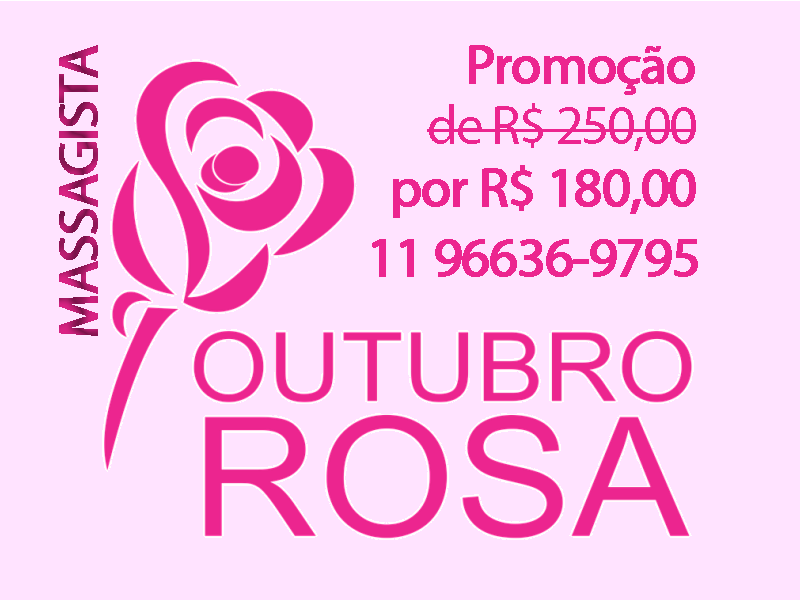
<style>
.page{position:relative;width:800px;height:600px;background:#ffe3ff}
.page>*{position:absolute;margin:0}
.t1{font:55.2px "MyriadPro-Regular";letter-spacing:-0.04em;font-weight:bold}
.t2{font:55.5px/61.4px "MyriadPro-Regular";letter-spacing:-0.04em;color:#ec258f;font-weight:bold}
.t3{font:55.5px/61.4px "MyriadPro-Regular";letter-spacing:-0.04em;color:#ec258f}
.t4{font:55.5px "MyriadPro-Regular";letter-spacing:-0.04em;color:#ec258f;font-weight:bold}
</style>
<div class="page">
<p class="t1" style="left:59px;top:45px;width:39px;height:291px;rotate:-90deg">MASSAGISTA</p>
<p class="t2" style="left:393px;top:45px;width:303px;height:173px;text-align:right">Promoção<br><span class="t3">de R$ 250,00<br></span>por R$ 180,00</p>
<p class="t4" style="left:372px;top:239px;width:326px;height:38px">11 96636-9795</p>
</div>
